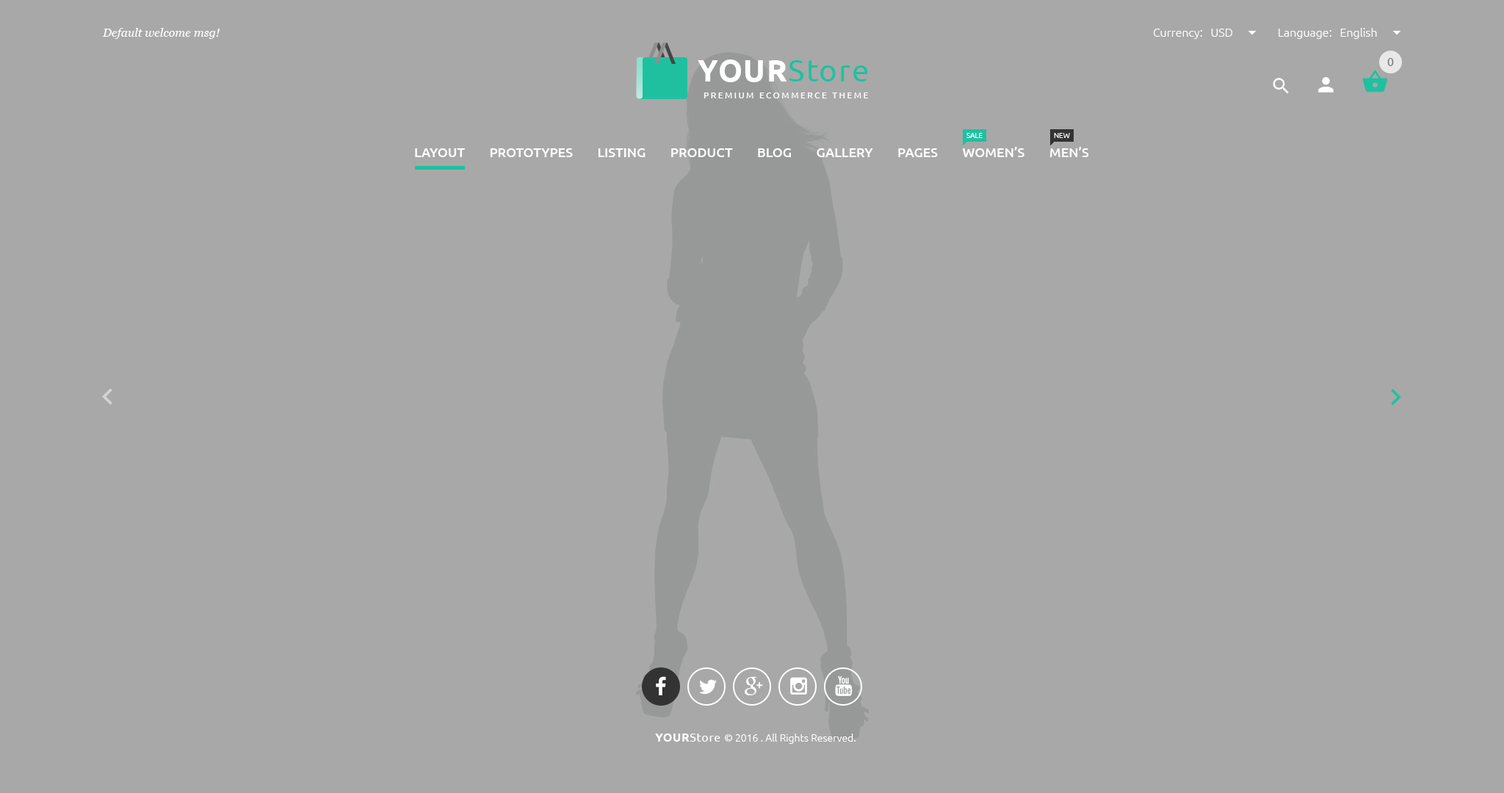
<style>
.page{position:relative;width:1504px;height:793px;background:#a8a8a8}
.page>*{position:absolute;margin:0}
.t1{font:11.7px "Georgia-Italic";color:#ffffff}
.t2{font:11.7px "Ubuntu-Light";color:#ffffff}
.t3{font:30.8px "Ubuntu";letter-spacing:0.04em;color:#1fc0a0}
.t4{font:30.8px "Ubuntu-Bold";letter-spacing:0.04em;color:#ffffff;text-transform:uppercase}
.t5{font:11.7px "Ubuntu";color:#777777}
.t6{font:8.8px "Ubuntu";letter-spacing:0.2em;color:#ffffff;text-transform:uppercase}
.t7{font:7.3px "Ubuntu-Light";color:#ffffff;text-transform:uppercase}
.t8{font:13.2px "Ubuntu-Medium";color:#ffffff;text-transform:uppercase}
.t9{font:10.3px "Ubuntu-Light";color:#ffffff}
.t10{font:11.7px "Ubuntu-Bold";letter-spacing:0.04em;color:#ffffff;text-transform:uppercase}
.t11{font:11.7px "Ubuntu";letter-spacing:0.04em;color:#ffffff}
</style>
<div class="page">
<p class="t1" style="left:102px;top:28px;width:118px;height:11px">Default welcome msg!</p>
<p class="t2" style="left:1153px;top:29px;width:79px;height:10px">Currency:   USD</p>
<p class="t2" style="left:1278px;top:28px;width:99px;height:11px">Language:   English</p>
<p class="t3" style="left:698px;top:59px;width:170px;height:23px"><span class="t4">Your</span>Store</p>
<p class="t5" style="left:1387px;top:58px;width:7px;height:8px">0</p>
<p class="t6" style="left:703px;top:93px;width:165px;height:5px">Premium ecommerce theme</p>
<p class="t7" style="left:966px;top:133px;width:16px;height:5px">sale</p>
<p class="t7" style="left:1054px;top:133px;width:16px;height:5px">New</p>
<p class="t8" style="left:415px;top:147px;width:674px;height:10px">LAYOUT        Prototypes        LISTING        PRODUCT        BLOG        GALLERY        PAGES        WOMEN’s        MEN’s</p>
<p class="t9" style="left:655px;top:734px;width:200px;height:10px"><span class="t10">Your</span><span class="t11">Store </span>© 2016 . All Rights Reserved.</p>
</div>
